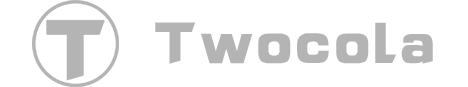
<style>
.page{position:relative;width:468px;height:87px;background:#ffffff}
.page>*{position:absolute;margin:0}
.t1{font:60px "JLinXin";color:#b4b4b4}
</style>
<div class="page">
<p class="t1" style="left:155px;top:22px;width:278px;height:42px">Twocola</p>
</div>
